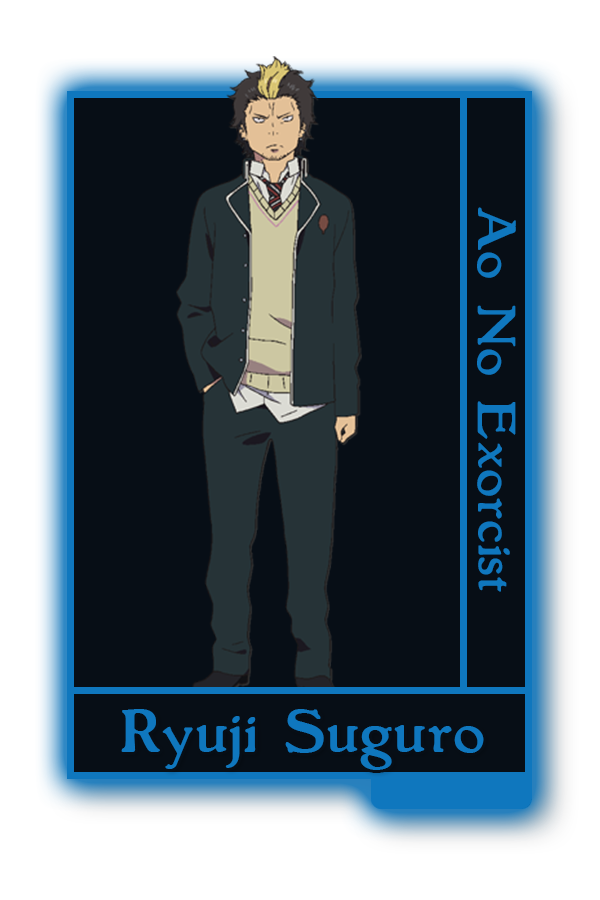
<style>
.page{position:relative;width:600px;height:900px;background:#070e16}
.page>*{position:absolute;margin:0}
.t1{font:48.8px "Grantham-Roman";color:#0f77be}
.t2{font:55.4px "Grantham-Roman";color:#0f77be}
</style>
<div class="page">
<p class="t1" style="left:477px;top:207px;width:39px;height:385px;rotate:90deg">Ao No Exorcist</p>
<p class="t2" style="left:121px;top:709px;width:363px;height:61px">Ryuji Suguro</p>
</div>
